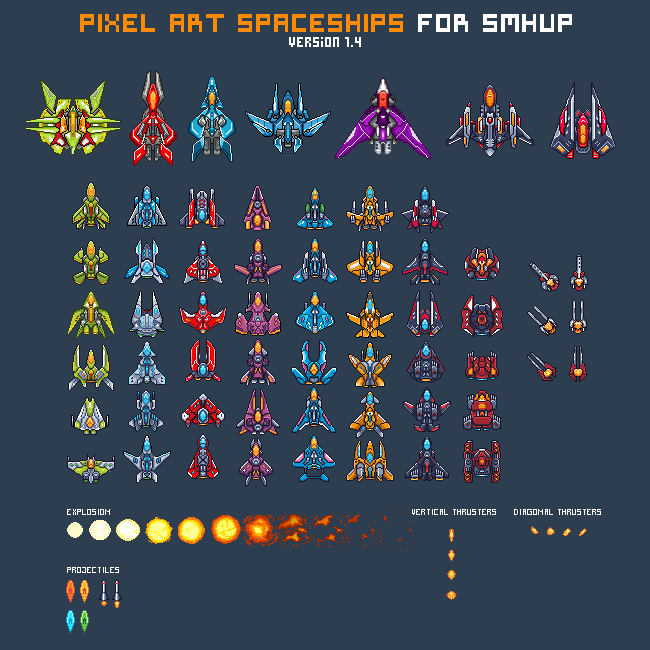
<style>
.page{position:relative;width:650px;height:650px;background:#2d3e50}
.page>*{position:absolute;margin:0}
.t1{font:24px "Symtext";color:#ff8a00}
.t2{font:24px "Symtext";color:#ffffff}
.t3{font:14px "Pixel";color:#ffffff}
.t4{font:9px "Pixel";color:#ffffff}
</style>
<div class="page">
<p class="t1" style="left:80px;top:14px;width:492px;height:18px">PIXEL ART SPACESHIPS <span class="t2">FOR SMHUP</span></p>
<p class="t3" style="left:289px;top:37px;width:72px;height:10px">version 1.4</p>
<p class="t4" style="left:67px;top:509px;width:43px;height:6px">EXPLOSION</p>
<p class="t4" style="left:412px;top:509px;width:84px;height:6px">VERTICAL THRUSTERS</p>
<p class="t4" style="left:514px;top:509px;width:87px;height:6px">DIAGONAL THRUSTERS</p>
<p class="t4" style="left:67px;top:567px;width:52px;height:6px">PROJECTILES</p>
</div>
